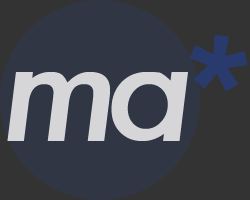
<style>
.page{position:relative;width:250px;height:200px;background:#313644}
.page>*{position:absolute;margin:0}
.t1{font:150px "Futura-MediumItalic";letter-spacing:-0.1em;color:#d6d5d8}
</style>
<div class="page">
<p class="t1" style="left:7px;top:35px;width:241px;height:106px">ma*</p>
</div>
